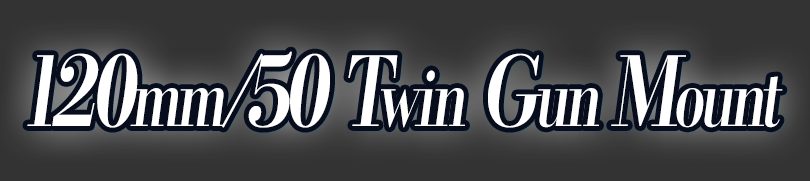
<style>
.page{position:relative;width:810px;height:181px;background:#333333}
.page>*{position:absolute;margin:0}
.t1{font:96px "KochoStd-Heavy";letter-spacing:-0.08em;color:#ffffff;font-style:italic;scale:0.75 1}
.t2{font:76.8px "KochoStd-Heavy";letter-spacing:-0.08em;color:#ffffff;font-style:italic;scale:0.75 1}
</style>
<div class="page">
<p class="t1" style="left:27px;top:51px;width:756px;height:77px">120<span class="t2">mm</span>/50 T<span class="t2">win</span> G<span class="t2">un </span>M<span class="t2">ount</span></p>
</div>
